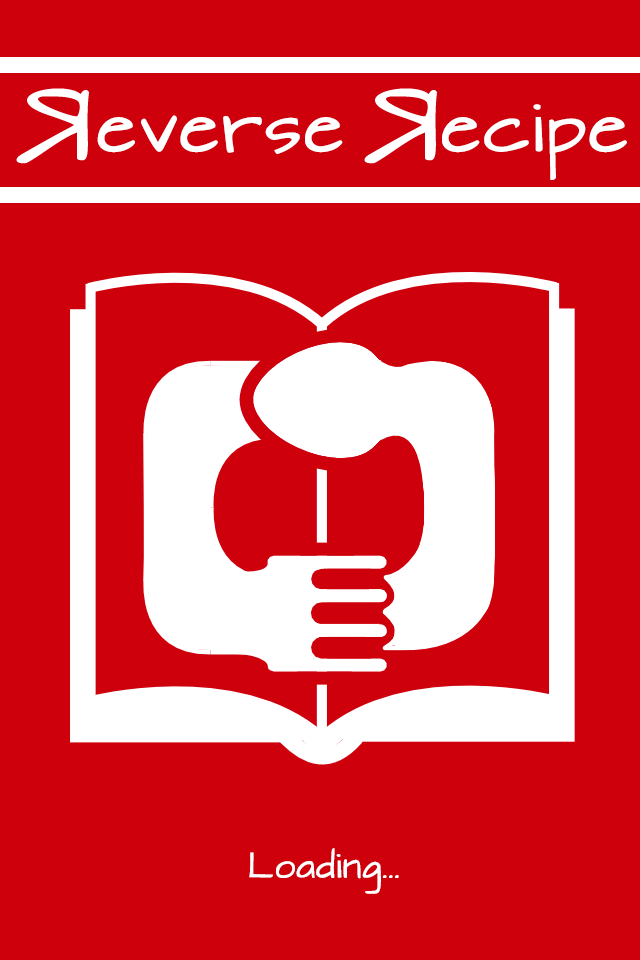
<style>
.page{position:relative;width:640px;height:960px;background:#ce000c}
.page>*{position:absolute;margin:0}
.t1{font:60px "ArchitectsDaughter";color:#ffffff;font-weight:bold}
.t2{font:30px "ArchitectsDaughter";color:#ffffff;font-weight:bold}
</style>
<div class="page">
<p class="t1" style="left:97px;top:104px;width:530px;height:76px">everse   ecipe</p>
<p class="t2" style="left:249px;top:848px;width:150px;height:46px">Loading...</p>
</div>
